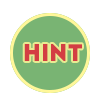
<style>
.page{position:relative;width:100px;height:107px;background:#ffffff}
.page>*{position:absolute;margin:0}
.t1{font:22.6px "BigJohn";color:#d33e43}
</style>
<div class="page">
<p class="t1" style="left:24px;top:44px;width:58px;height:17px">HINT</p>
</div>
